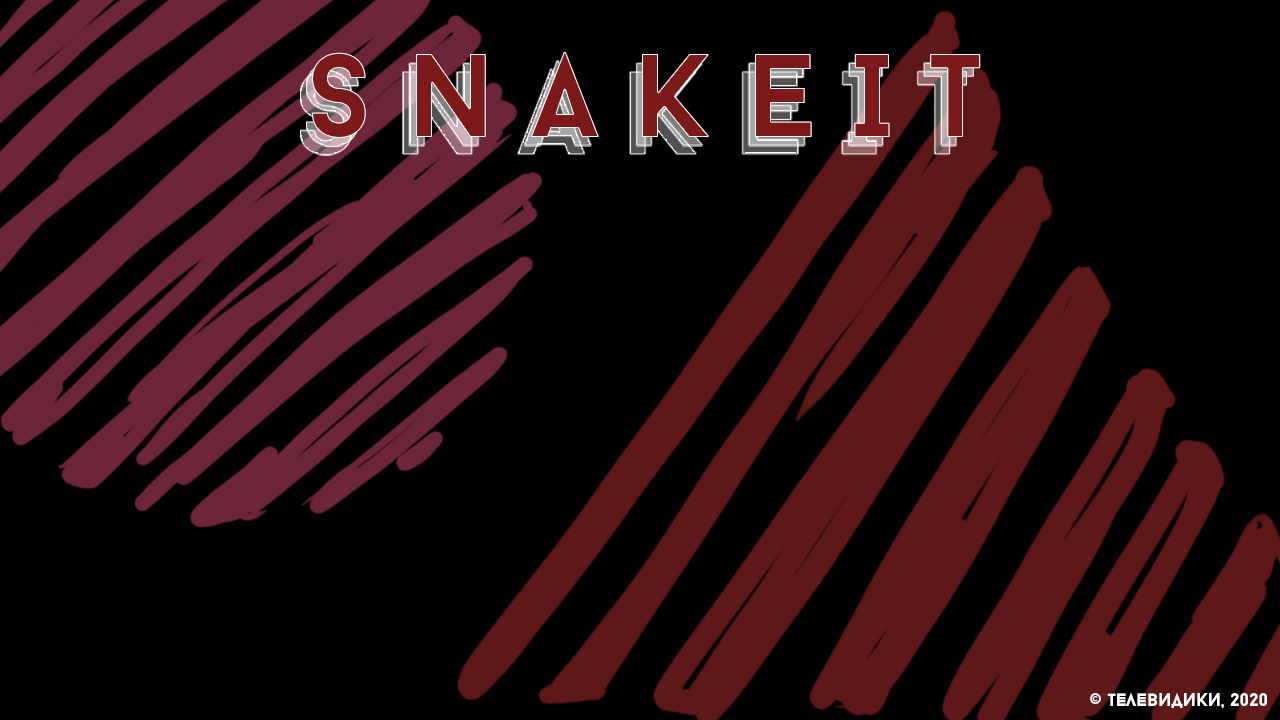
<style>
.page{position:relative;width:1280px;height:720px;background:#000000}
.page>*{position:absolute;margin:0}
.t1{font:118.7px "BaronNeueBold";letter-spacing:0.3em;color:#7e1919}
.t2{font:18px "BaronNeueBold";color:#ffffff}
</style>
<div class="page">
<p class="t1" style="left:312px;top:51px;width:669px;height:88px">SNAKEIT</p>
<p class="t2" style="left:1090px;top:693px;width:177px;height:16px">© тЕлЕвидики, 2020</p>
</div>
